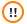
<style>
.page{position:relative;width:27px;height:24px;background:#ffffff}
.page>*{position:absolute;margin:0}
.t1{font:12px "Arial-BoldMT";letter-spacing:0.04em;color:#1f1f1f}
</style>
<div class="page">
<p class="t1" style="left:10px;top:8px;width:7px;height:9px">!!</p>
</div>
